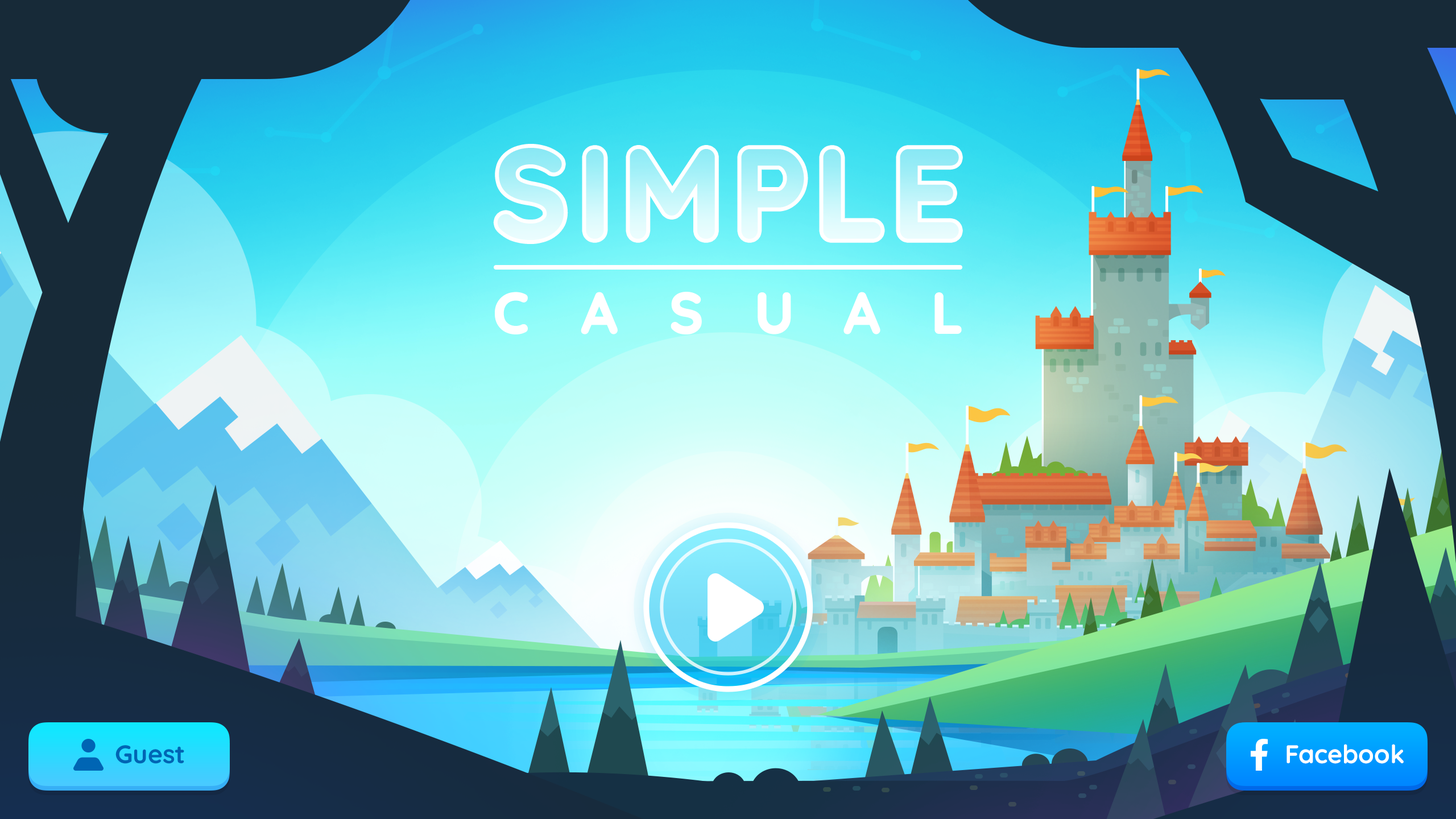
<style>
.page{position:relative;width:1456px;height:819px}
.page>*{position:absolute;margin:0}
.t1{font:125.1px "Quicksand-Bold";letter-spacing:0.07em;font-weight:bold}
.t2{font:56.9px "Quicksand-Bold";letter-spacing:0.9em;color:#ffffff;font-weight:bold}
.t3{font:25.6px "Quicksand-Bold";color:#0065b4}
.t4{font:25.6px "Quicksand-Bold";color:#ffffff}
</style>
<div class="page">
<p class="t1" style="left:497px;top:148px;width:462px;height:92px">SIMPLE</p>
<p class="t2" style="left:495px;top:292px;width:467px;height:42px">CASUAL</p>
<p class="t3" style="left:115px;top:745px;width:69px;height:19px">Guest</p>
<p class="t4" style="left:1286px;top:744px;width:118px;height:20px">Facebook</p>
</div>
